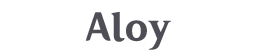
<style>
.page{position:relative;width:256px;height:56px;background:#ffffff}
.page>*{position:absolute;margin:0}
.t1{font:36px "HYWenHei-HEW";color:#4f4e57}
</style>
<div class="page">
<p class="t1" style="left:85px;top:11px;width:86px;height:39px">Aloy</p>
</div>
